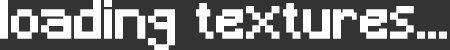
<style>
.page{position:relative;width:450px;height:50px;background:#333333}
.page>*{position:absolute;margin:0}
.t1{font:51px "Minecraft";color:#fefefe;font-weight:bold}
</style>
<div class="page">
<p class="t1" style="left:0px;top:0px;width:447px;height:52px">loading textures...</p>
</div>
